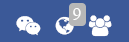
<style>
.page{position:relative;width:129px;height:42px;background:#3b5998}
.page>*{position:absolute;margin:0}
.t1{font:18px "TimesNewRomanPSMT";color:#ffffff}
</style>
<div class="page">
<p class="t1" style="left:73px;top:8px;width:8px;height:12px">9</p>
</div>
